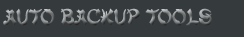
<style>
.page{position:relative;width:244px;height:37px;background:#353a3d}
.page>*{position:absolute;margin:0}
.t1{font:24px "MandarinD"}
</style>
<div class="page">
<p class="t1" style="left:3px;top:8px;width:209px;height:18px">Auto Backup Tools</p>
</div>
